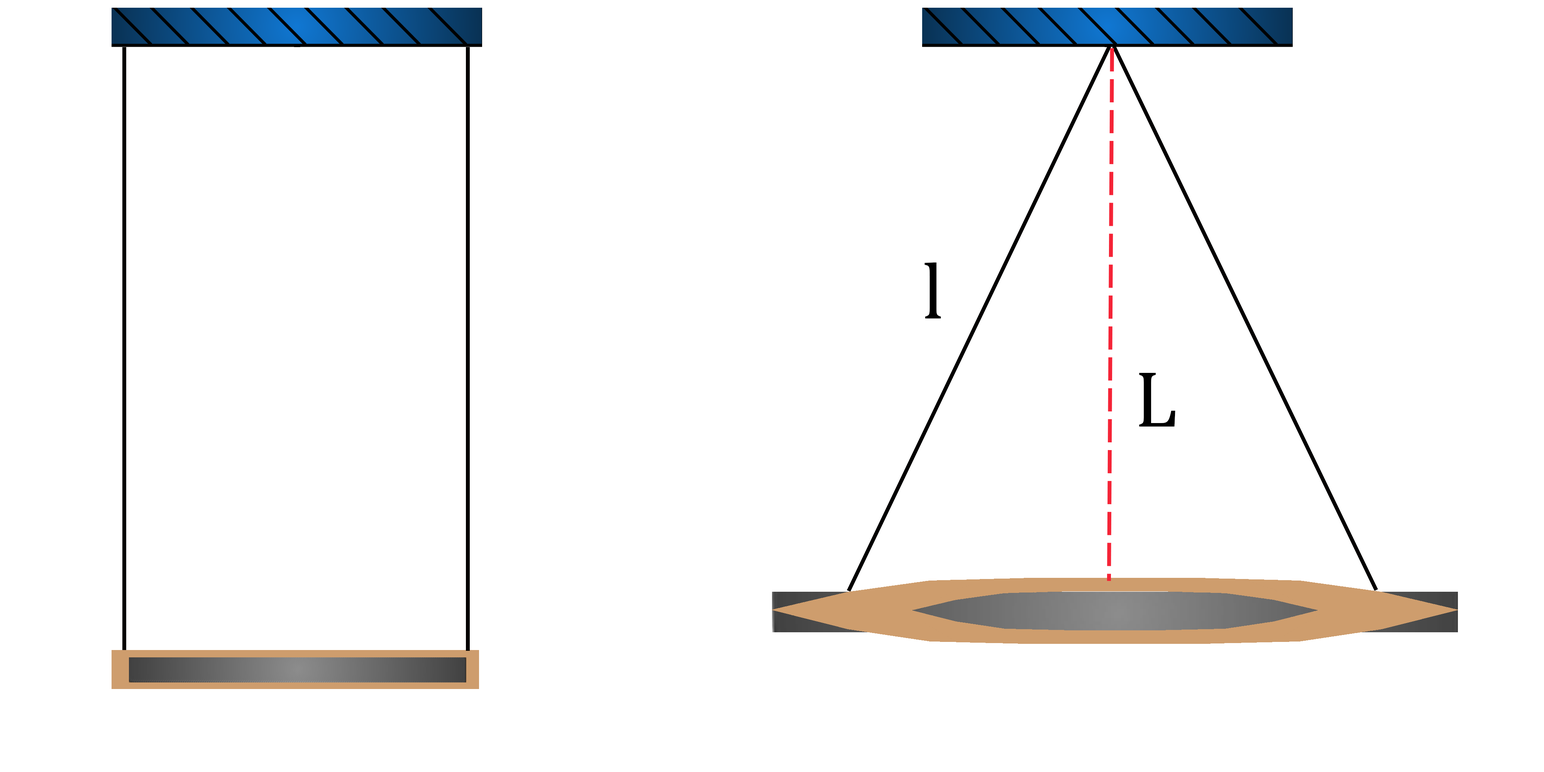
<style>
.page{position:relative;width:1544px;height:772px;background:#ffffff}
.page>*{position:absolute;margin:0}
.t1{font:80.4px "CambriaMath";color:#000000}
</style>
<div class="page">
<p class="t1" style="left:925px;top:263px;width:16px;height:56px">l</p>
<p class="t1" style="left:1139px;top:373px;width:37px;height:54px">L</p>
</div>
